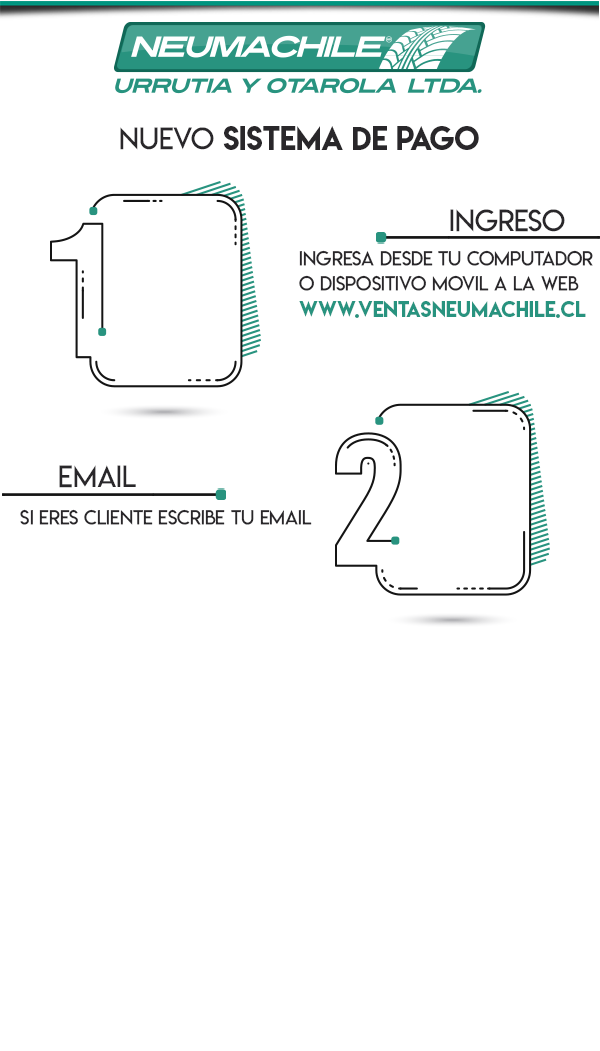
<style>
.page{position:relative;width:600px;height:1051px;background:#ffffff}
.page>*{position:absolute;margin:0}
.t1{font:29.6px "LemonMilk";color:#29272a}
.t2{font:29.6px "LemonMilklight";color:#29272a}
.t3{font:19.6px/24.8px "LemonMilklight";color:#29272a}
.t4{font:19.6px "LemonMilk";color:#28937f}
.t5{font:19.6px "LemonMilklight";color:#29272a}
</style>
<div class="page">
<p class="t1" style="left:120px;top:126px;width:359px;height:24px"><span class="t2">NUEVO </span>SISTEMA DE PAGO</p>
<p class="t2" style="left:450px;top:209px;width:115px;height:23px">INGRESO</p>
<p class="t3" style="left:299px;top:250px;width:294px;height:41px">INGRESA DESDE TU COMPUTADOR<br>O DISPOSITIVO MOVIL A LA WEB</p>
<p class="t4" style="left:299px;top:300px;width:287px;height:18px">WWW.VENTASNEUMACHILE.CL</p>
<p class="t2" style="left:59px;top:465px;width:77px;height:23px">EMAIL</p>
<p class="t5" style="left:20px;top:509px;width:292px;height:16px">SI ERES CLIENTE ESCRIBE TU EMAIL</p>
</div>
